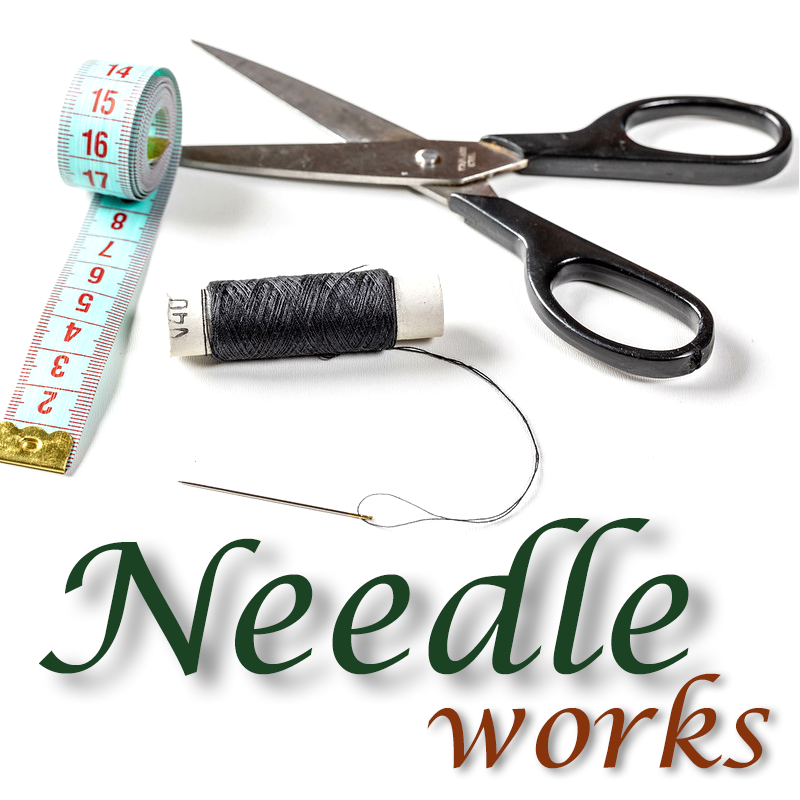
<style>
.page{position:relative;width:800px;height:800px;background:#ffffff}
.page>*{position:absolute;margin:0}
.t1{font:180px "LucidaCalligraphy-Italic";color:#1b4323}
.t2{font:109px "LucidaCalligraphy-Italic";color:#87340c}
</style>
<div class="page">
<p class="t1" style="left:39px;top:518px;width:650px;height:158px">Needle</p>
<p class="t2" style="left:427px;top:673px;width:343px;height:96px">works</p>
</div>
